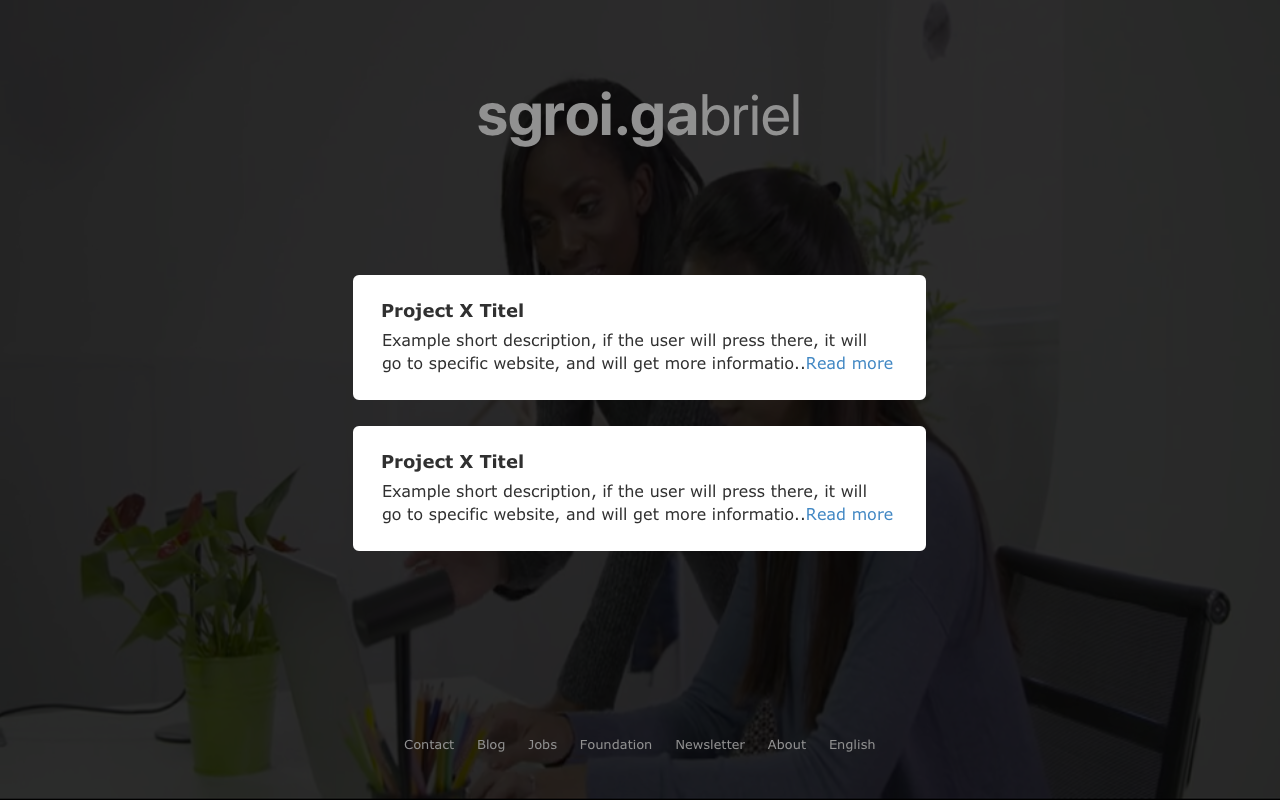
<style>
.page{position:relative;width:1280px;height:800px}
.page>*{position:absolute;margin:0}
.t1{font:60px "SFProDisplay-Bold";color:#919191}
.t2{font:58px "SFProDisplay-Regular";color:#919191}
.t3{font:18px "Verdana-Bold";color:#303030}
.t4{font:16px/22.5px "Verdana";color:#303030}
.t5{font:16px/22.5px "Verdana";color:#4187c3}
.t6{font:13px "Verdana";color:#919191}
</style>
<div class="page">
<p class="t1" style="left:478px;top:91px;width:321px;height:56px">sgroi.ga<span class="t2">briel</span></p>
<p class="t3" style="left:382px;top:303px;width:141px;height:18px">Project X Titel</p>
<p class="t4" style="left:382px;top:333px;width:511px;height:40px">Example short description, if the user will press there, it will<br>go to specific website, and will get more informatio..<span class="t5">Read more</span></p>
<p class="t3" style="left:382px;top:454px;width:141px;height:18px">Project X Titel</p>
<p class="t4" style="left:382px;top:484px;width:511px;height:40px">Example short description, if the user will press there, it will<br>go to specific website, and will get more informatio..<span class="t5">Read more</span></p>
<p class="t6" style="left:404px;top:739px;width:471px;height:13px">Contact     Blog     Jobs     Foundation     Newsletter     About     English</p>
</div>
